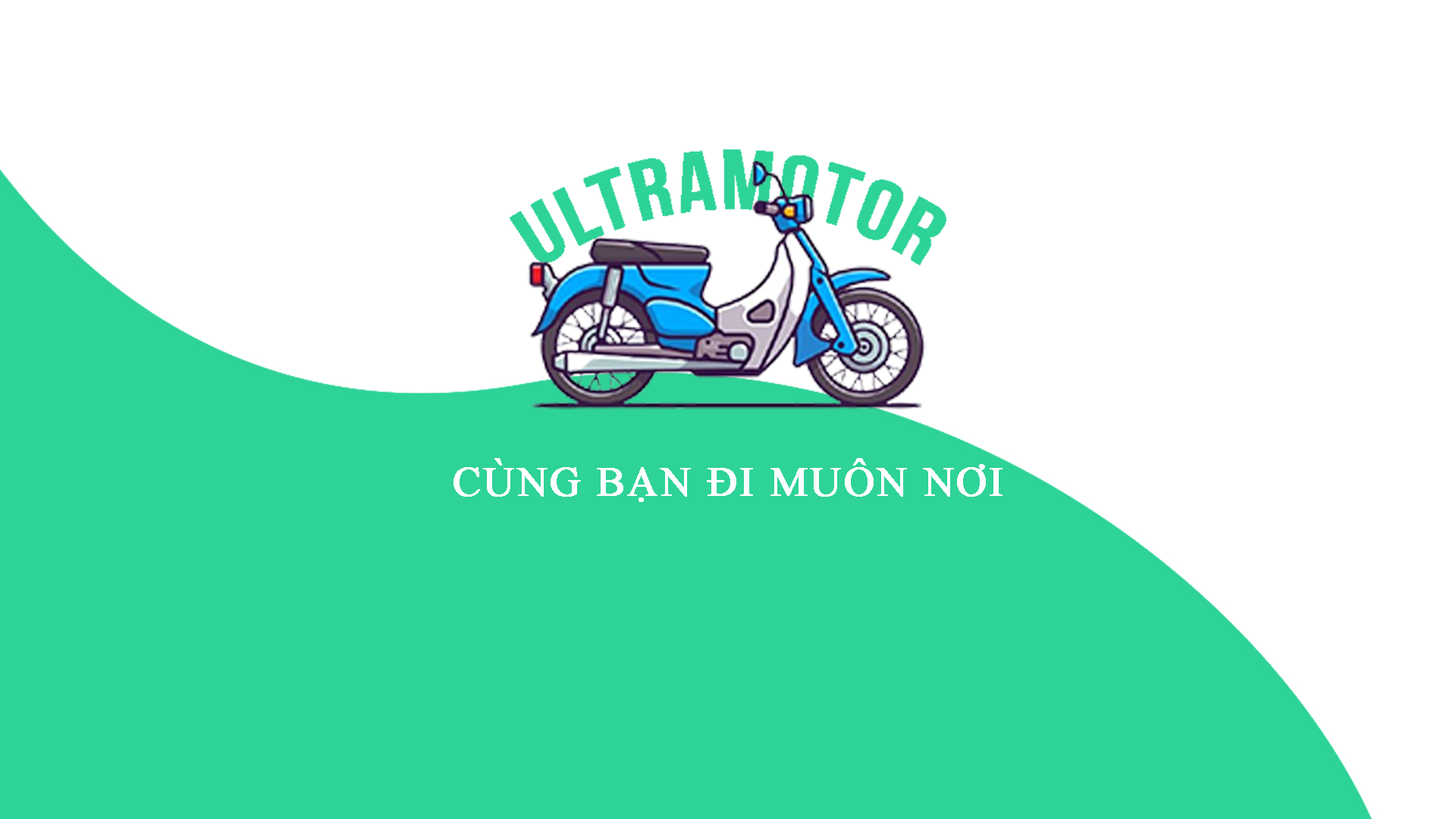
<style>
.page{position:relative;width:1456px;height:819px;background:#ffffff}
.page>*{position:absolute;margin:0}
.t1{font:41.4px "TimesNewRomanPSMT";letter-spacing:0.05em;color:#ffffff;font-weight:bold}
</style>
<div class="page">
<p class="t1" style="left:453px;top:458px;width:550px;height:44px">CÙNG BẠN ĐI MUÔN NƠI</p>
</div>
